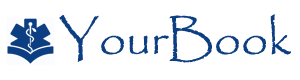
<style>
.page{position:relative;width:300px;height:80px;background:#ffffff}
.page>*{position:absolute;margin:0}
.t1{font:48px "Papyrus-Regular";color:#0c3e82}
</style>
<div class="page">
<p class="t1" style="left:59px;top:14px;width:232px;height:49px">YourBook</p>
</div>
